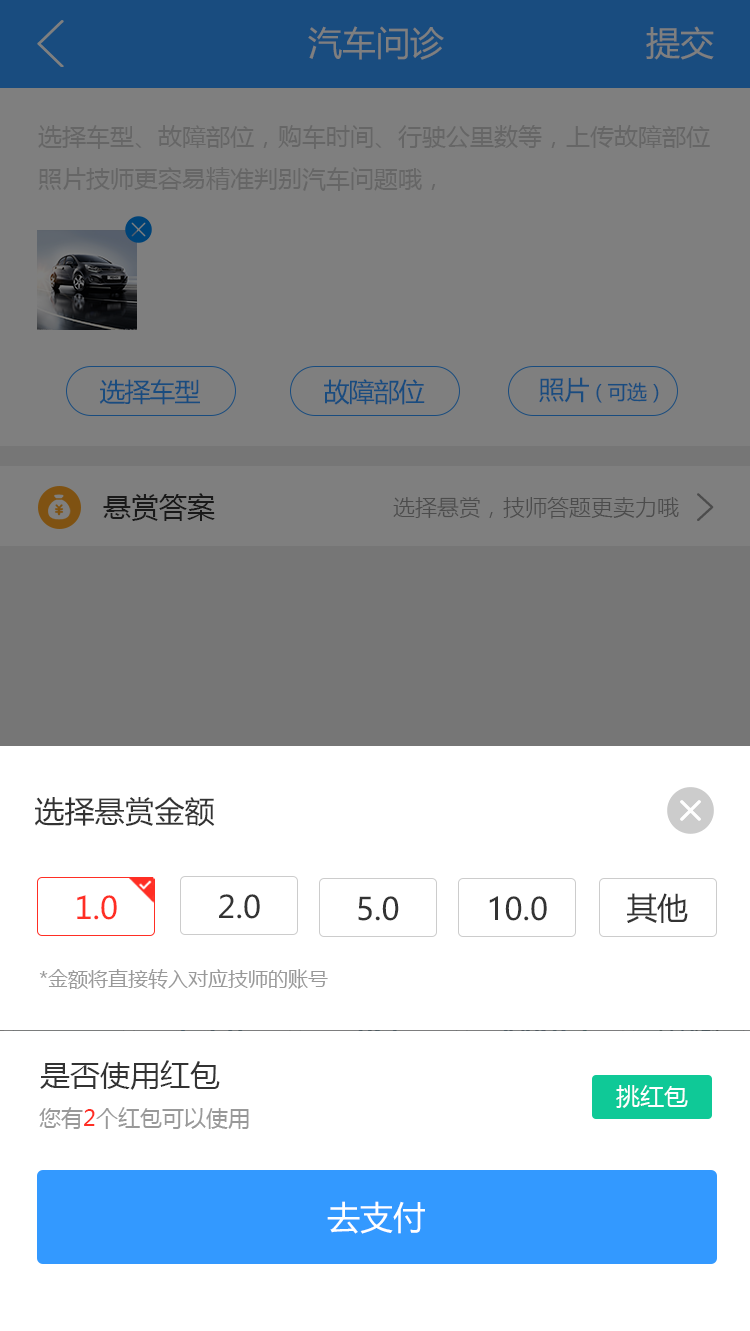
<style>
.page{position:relative;width:750px;height:1331px;background:#ffffff}
.page>*{position:absolute;margin:0}
.t1{font:34px "MicrosoftYaHei";color:#7f7f7f}
.t2{font:24px "MicrosoftYaHei";color:#666666}
.t3{font:20px "MicrosoftYaHei";letter-spacing:-0.04em;color:#194c7f}
.t4{font:26px "MicrosoftYaHei";letter-spacing:-0.04em;color:#194c7f}
.t5{font:28px "MicrosoftYaHei";color:#191919}
.t6{font:22px "MicrosoftYaHeiLight";color:#4c4c4c}
.t7{font:30px "MicrosoftYaHei";color:#333333}
.t8{font:30.7px "MicrosoftYaHei";color:#333333}
.t9{font:30.7px "MicrosoftYaHei";color:#ff2e24}
.t10{font:20px "MicrosoftYaHei";color:#999999}
.t11{font:24px "MicrosoftYaHei";color:#ffffff}
.t12{font:22px "MicrosoftYaHei";color:#999999}
.t13{font:22px "MicrosoftYaHei";color:#ff2e24}
.t14{font:32.9px "MicrosoftYaHei";color:#ffffff}
</style>
<div class="page">
<p class="t1" style="left:308px;top:26px;width:136px;height:34px">汽车问诊</p>
<p class="t1" style="left:646px;top:26px;width:68px;height:34px">提交</p>
<p class="t2" style="left:38px;top:125px;width:672px;height:66px">选择车型、故障部位，购车时间、行驶公里数等，上传故障部位照片技师更容易精准判别汽车问题哦，</p>
<p class="t3" style="left:539px;top:377px;width:120px;height:26px"><span class="t4">照片</span>（可选）</p>
<p class="t4" style="left:99px;top:379px;width:101px;height:26px">选择车型</p>
<p class="t4" style="left:324px;top:379px;width:101px;height:26px">故障部位</p>
<p class="t5" style="left:103px;top:493px;width:112px;height:28px">悬赏答案</p>
<p class="t6" style="left:393px;top:497px;width:286px;height:22px">选择悬赏，技师答题更卖力哦</p>
<p class="t7" style="left:35px;top:797px;width:180px;height:30px">选择悬赏金额</p>
<p class="t8" style="left:219px;top:894px;width:41px;height:25px">2.0</p>
<p class="t8" style="left:627px;top:893px;width:61px;height:30px">其他</p>
<p class="t9" style="left:77px;top:895px;width:40px;height:25px">1.0</p>
<p class="t8" style="left:358px;top:896px;width:41px;height:25px">5.0</p>
<p class="t8" style="left:489px;top:896px;width:58px;height:25px">10.0</p>
<p class="t10" style="left:39px;top:969px;width:289px;height:20px">*金额将直接转入对应技师的账号</p>
<p class="t7" style="left:40px;top:1060px;width:180px;height:30px">是否使用红包</p>
<p class="t11" style="left:616px;top:1085px;width:72px;height:23px">挑红包</p>
<p class="t12" style="left:39px;top:1107px;width:210px;height:22px">您有<span class="t13">2</span>个红包可以使用</p>
<p class="t14" style="left:327px;top:1201px;width:98px;height:33px">去支付</p>
</div>
